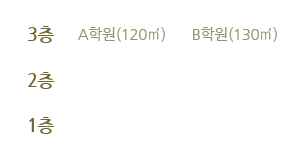
<style>
.page{position:relative;width:300px;height:160px;background:#ffffff}
.page>*{position:absolute;margin:0}
.t1{font:18px "NanumGothicBold";letter-spacing:-0.025em;color:#70662f}
.t2{font:15px "NanumGothic";letter-spacing:-0.025em;color:#999167}
</style>
<div class="page">
<p class="t1" style="left:28px;top:26px;width:27px;height:17px">3층</p>
<p class="t2" style="left:78px;top:27px;width:87px;height:15px">A학원(120㎡)</p>
<p class="t2" style="left:193px;top:27px;width:84px;height:15px">B학원(130㎡)</p>
<p class="t1" style="left:28px;top:72px;width:27px;height:17px">2층</p>
<p class="t1" style="left:29px;top:117px;width:26px;height:17px">1층</p>
</div>
